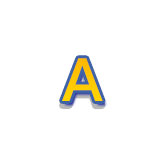
<style>
.page{position:relative;width:164px;height:164px;background:#ffffff}
.page>*{position:absolute;margin:0}
.t1{font:59.8px "PingFangHK-Semibold";color:#ffca00;text-transform:uppercase}
</style>
<div class="page">
<p class="t1" style="left:62px;top:58px;width:41px;height:43px">a</p>
</div>
